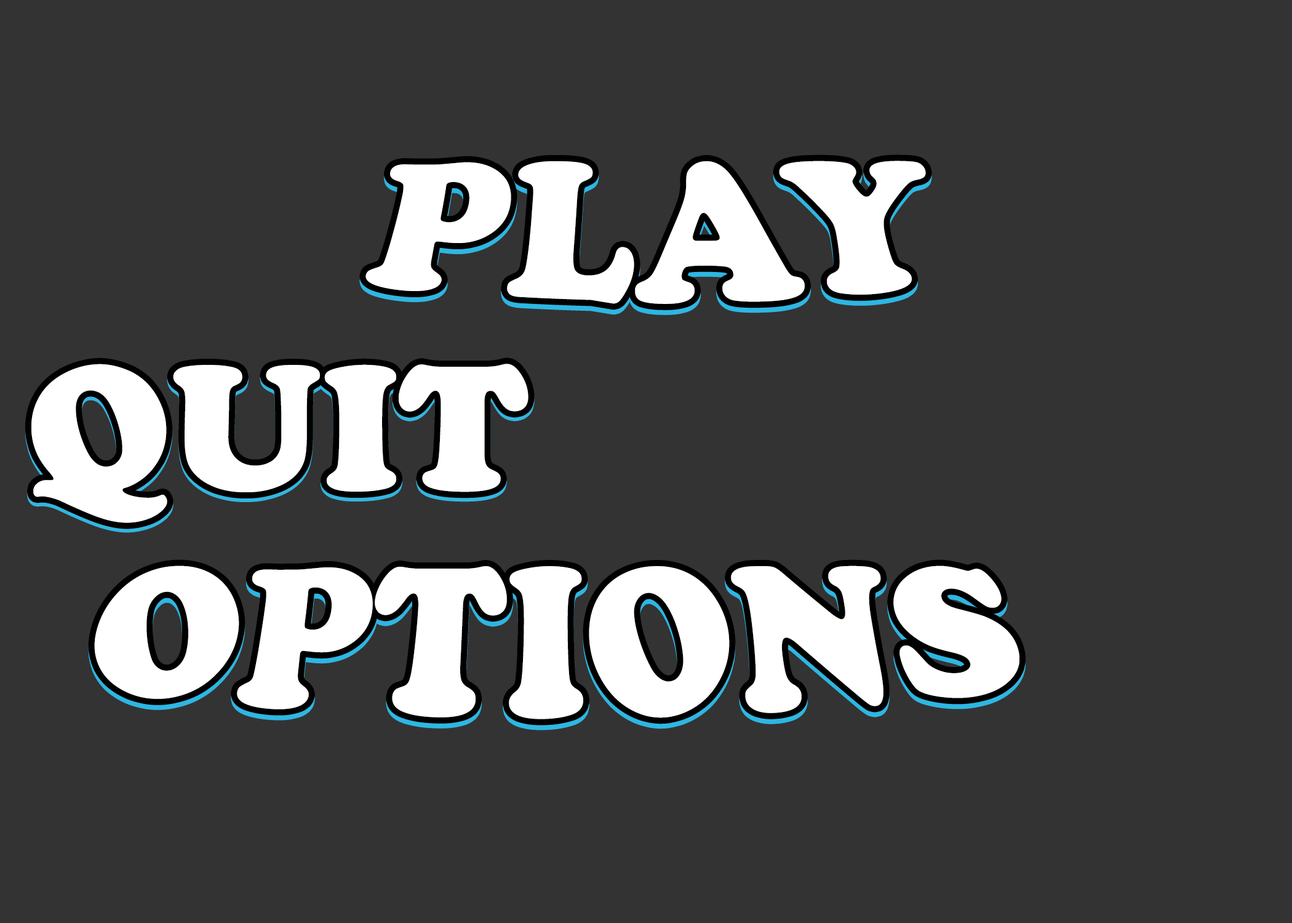
<style>
.page{position:relative;width:1292px;height:923px;background:#333333}
.page>*{position:absolute;margin:0}
.t1{font:184.6px "CooperBlack";color:#ffffff}
</style>
<div class="page">
<p class="t1" style="left:365px;top:161px;width:561px;height:143px">PLAY</p>
<p class="t1" style="left:365px;top:166px;width:561px;height:143px">PLAY</p>
<p class="t1" style="left:31px;top:364px;width:498px;height:159px">QUIT</p>
<p class="t1" style="left:31px;top:367px;width:498px;height:160px">QUIT</p>
<p class="t1" style="left:94px;top:565px;width:925px;height:154px">OPTIONS</p>
<p class="t1" style="left:94px;top:570px;width:925px;height:154px">OPTIONS</p>
</div>
